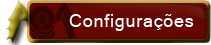
<style>
.page{position:relative;width:211px;height:45px;background:#650600}
.page>*{position:absolute;margin:0}
.t1{font:18px "MicrosoftSansSerif";letter-spacing:0.04em;color:#ffffff}
</style>
<div class="page">
<p class="t1" style="left:69px;top:14px;width:125px;height:17px">Configurações</p>
</div>
